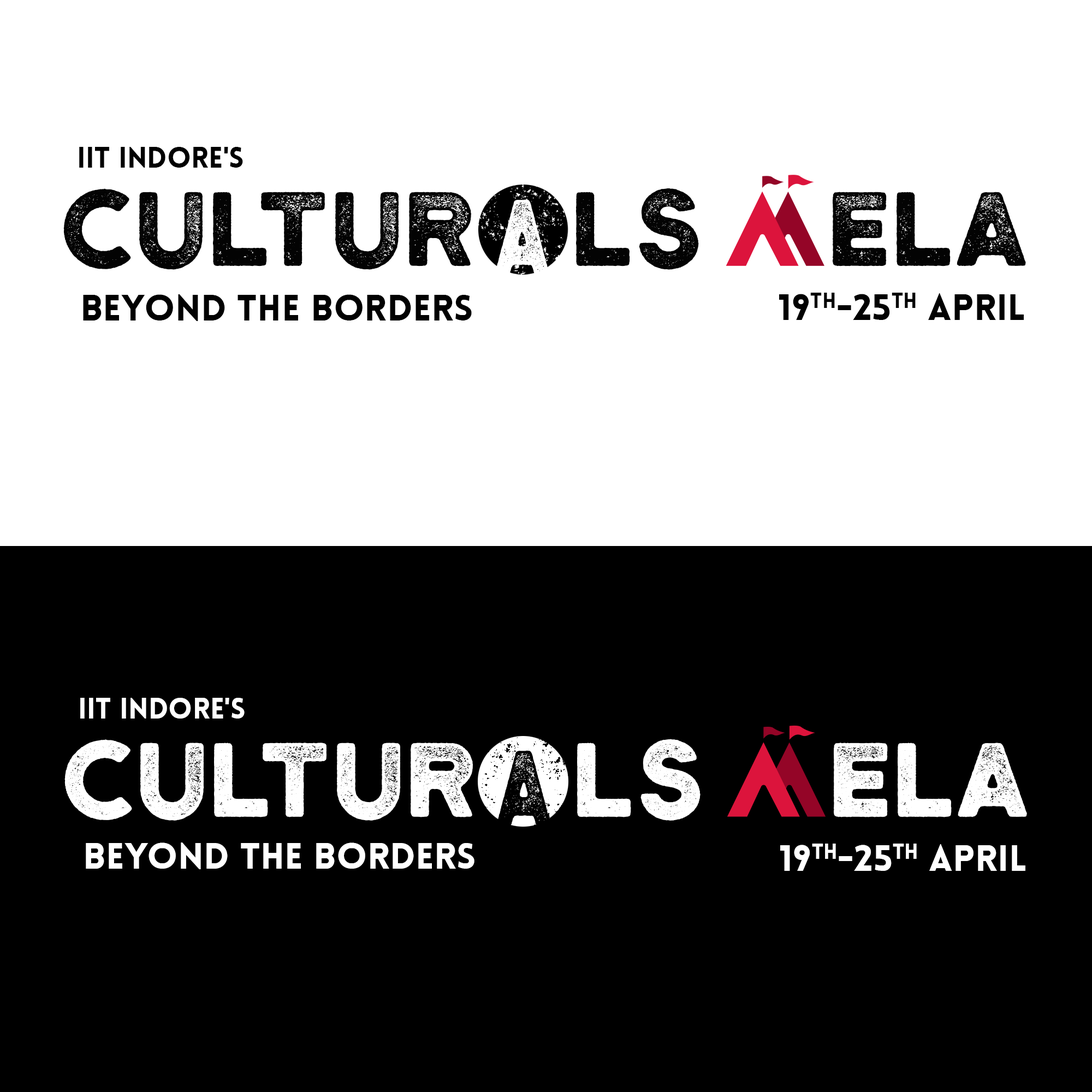
<style>
.page{position:relative;width:1092px;height:1092px;background:#ffffff}
.page>*{position:absolute;margin:0}
.t1{font:28.3px "Lovelo-Black";letter-spacing:0.005em;color:#010101}
.t2{font:122.3px "Henrik-Normal";letter-spacing:0.005em;color:#030303}
.t3{font:122.3px "Henrik-Normal";letter-spacing:0.01em;color:#030303}
.t4{font:36.4px "Lovelo-Black";letter-spacing:0.005em;color:#010101}
.t5{font:28.3px "Lovelo-Black";letter-spacing:0.005em;color:#ffffff}
.t6{font:122.3px "Henrik-Normal";letter-spacing:0.005em;color:#ffffff}
.t7{font:122.3px "Henrik-Normal";letter-spacing:0.01em;color:#ffffff}
.t8{font:36.4px "Lovelo-Black";letter-spacing:0.005em;color:#ffffff}
</style>
<div class="page">
<p class="t1" style="left:79px;top:147px;width:164px;height:21px">IIT Indore's</p>
<p class="t2" style="left:63px;top:188px;width:963px;height:82px">cultu<span class="t3">r   l</span>s    ela</p>
<p class="t4" style="left:779px;top:293px;width:245px;height:27px">19th-25th April</p>
<p class="t4" style="left:83px;top:294px;width:389px;height:27px">Beyond the Borders</p>
<p class="t5" style="left:80px;top:698px;width:165px;height:21px">IIT Indore's</p>
<p class="t6" style="left:64px;top:739px;width:963px;height:82px">cultu<span class="t7">r   l</span>s    ela</p>
<p class="t8" style="left:86px;top:842px;width:388px;height:27px">Beyond the Borders</p>
<p class="t8" style="left:780px;top:844px;width:245px;height:27px">19th-25th April</p>
</div>
